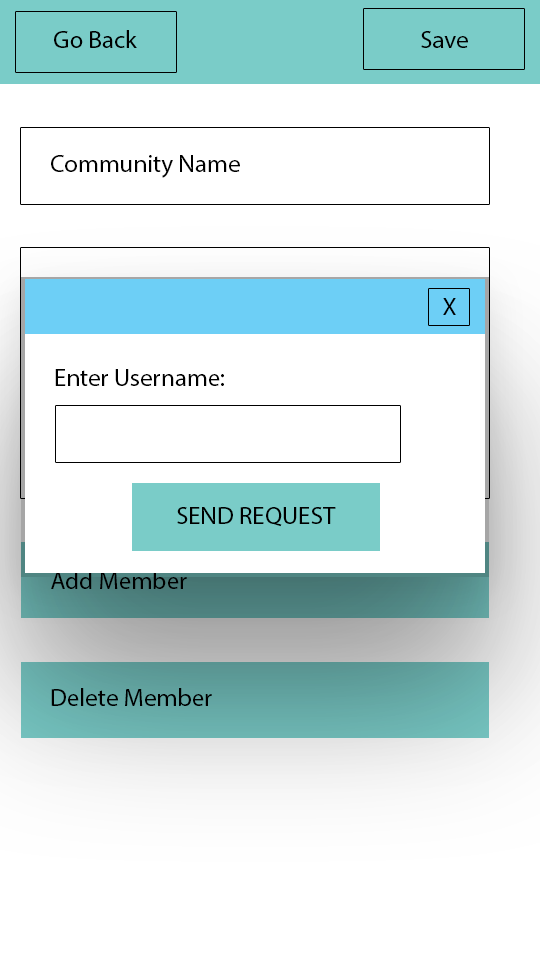
<style>
.page{position:relative;width:540px;height:960px;background:#ffffff}
.page>*{position:absolute;margin:0}
.t1{font:25px "MyriadPro-Regular";color:#000000}
</style>
<div class="page">
<p class="t1" style="left:54px;top:30px;width:83px;height:18px">Go Back</p>
<p class="t1" style="left:421px;top:31px;width:47px;height:17px">Save</p>
<p class="t1" style="left:51px;top:155px;width:189px;height:23px">Community Name</p>
<p class="t1" style="left:443px;top:298px;width:13px;height:17px">X</p>
<p class="t1" style="left:55px;top:369px;width:169px;height:17px">Enter Username:</p>
<p class="t1" style="left:177px;top:507px;width:159px;height:20px">SEND REQUEST</p>
<p class="t1" style="left:51px;top:571px;width:136px;height:18px">Add Member</p>
<p class="t1" style="left:51px;top:688px;width:161px;height:18px">Delete Member</p>
</div>
